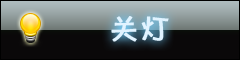
<style>
.page{position:relative;width:240px;height:60px;background:#0a0809}
.page>*{position:absolute;margin:0}
.t1{font:30px "FZKATJW--GB1-0";color:#e1f3ff;font-weight:bold}
</style>
<div class="page">
<p class="t1" style="left:111px;top:16px;width:58px;height:26px">关灯</p>
</div>
